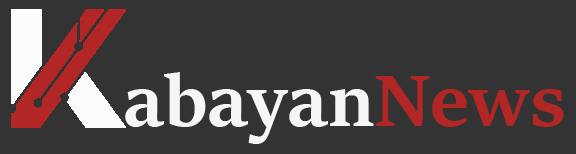
<style>
.page{position:relative;width:576px;height:154px;background:#333333}
.page>*{position:absolute;margin:0}
.t1{font:80.3px "SitkaHeading-Bold";color:#f6f6f6}
.t2{font:80.3px "SitkaHeading-Bold";color:#b22626}
</style>
<div class="page">
<p class="t1" style="left:125px;top:72px;width:439px;height:72px">abayan<span class="t2">News</span></p>
</div>
